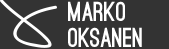
<style>
.page{position:relative;width:169px;height:49px;background:#333333}
.page>*{position:absolute;margin:0}
.t1{font:26px/26px "OstrichSans-Black";color:#ffffff}
</style>
<div class="page">
<p class="t1" style="left:68px;top:1px;width:74px;height:46px">Marko<br> Oksanen</p>
</div>
